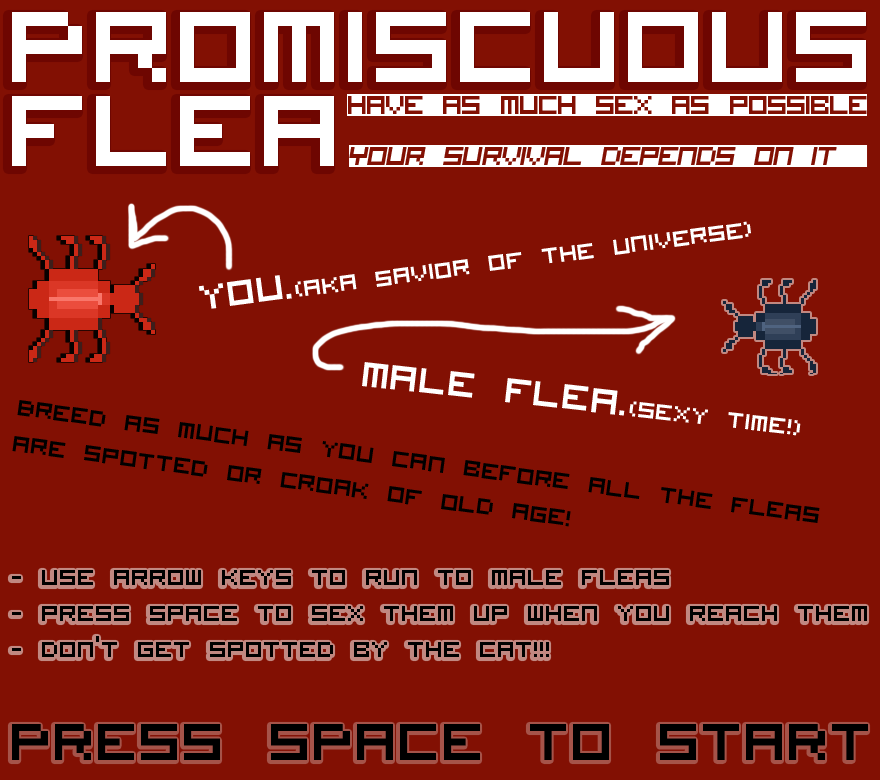
<style>
.page{position:relative;width:880px;height:780px;background:#821003}
.page>*{position:absolute;margin:0}
.t1{font:140px/84px "VisitorTT1BRK";color:#ffffff}
.t2{font:35.3px/51px "VisitorTT1BRK";letter-spacing:-0.06em;color:#821003}
.t3{font:35.3px/51px "VisitorTT1BRK";letter-spacing:-0.06em;color:#821003;font-style:italic}
.t4{font:30px "VisitorTT1BRK";color:#ffffff}
.t5{font:48px "VisitorTT1BRK";color:#ffffff}
.t6{font:30px "VisitorTT1BRK";color:#000000}
.t7{font:72px "VisitorTT1BRK";color:#000000}
</style>
<div class="page">
<p class="t1" style="left:12px;top:12px;width:854px;height:154px">Promiscuous <br>flea</p>
<p class="t2" style="left:348px;top:96px;width:519px;height:69px">Have as much sex as possible<br><span class="t3">Your survival depends on it</span></p>
<p class="t4" style="left:198px;top:221px;width:553px;height:88px;rotate:-8deg"><span class="t5">you.</span>(AKA savior of the universe)</p>
<p class="t4" style="left:362px;top:362px;width:439px;height:74px;rotate:6deg"><span class="t5">male flea.</span>(sexy time!)</p>
<p class="t6" style="left:12px;top:400px;width:808px;height:127px;rotate:8deg">Breed as much as you can before all the fleas<br>are spotted or croak of old age!</p>
<p class="t6" style="left:12px;top:570px;width:855px;height:87px">- Use arrow keys to run to male fleas<br>- press space to sex them up when you reach them<br>- don’t get spotted by the cat!!!</p>
<p class="t7" style="left:12px;top:724px;width:856px;height:36px">PRESS SPACE TO START</p>
</div>
